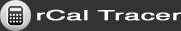
<style>
.page{position:relative;width:181px;height:31px;background:#333333}
.page>*{position:absolute;margin:0}
.t1{font:14px "Helvetica";color:#ffffff;font-weight:bold;scale:2 1}
</style>
<div class="page">
<p class="t1" style="left:37px;top:9px;width:144px;height:12px">rCal Tracer</p>
</div>
